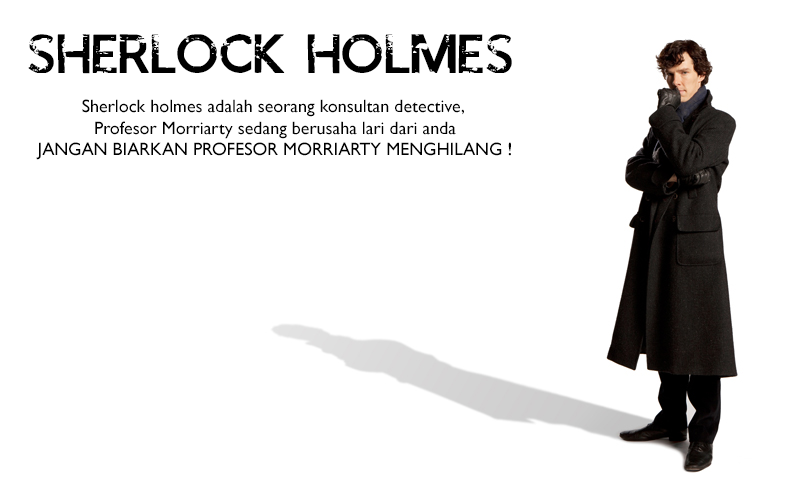
<style>
.page{position:relative;width:800px;height:500px;background:#ffffff}
.page>*{position:absolute;margin:0}
.t1{font:38.8px "IAMSHERLOCKED";color:#000000}
.t2{font:18px "GillSansMT";color:#000000}
</style>
<div class="page">
<p class="t1" style="left:28px;top:34px;width:484px;height:40px">SHERLOCK HOLMES</p>
<p class="t2" style="left:36px;top:99px;width:475px;height:61px;text-align:center">Sherlock holmes adalah seorang konsultan detective, <br>Profesor Morriarty sedang berusaha lari dari anda<br>JANGAN BIARKAN PROFESOR MORRIARTY MENGHILANG !</p>
</div>
